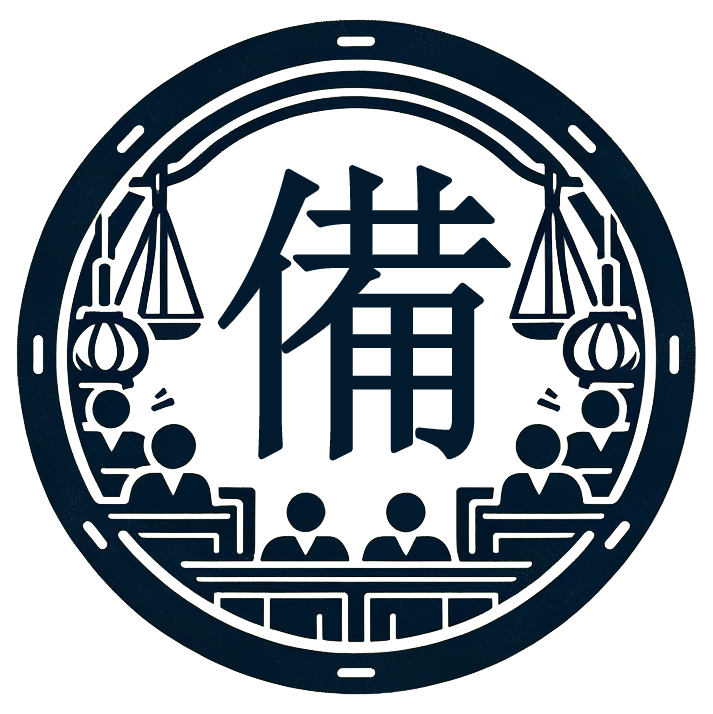
<style>
.page{position:relative;width:713px;height:714px;background:#ffffff}
.page>*{position:absolute;margin:0}
.t1{font:314px "NSimSun";letter-spacing:0.86em;color:#021a2e}
</style>
<div class="page">
<p class="t1" style="left:220px;top:168px;width:288px;height:290px">備</p>
</div>
